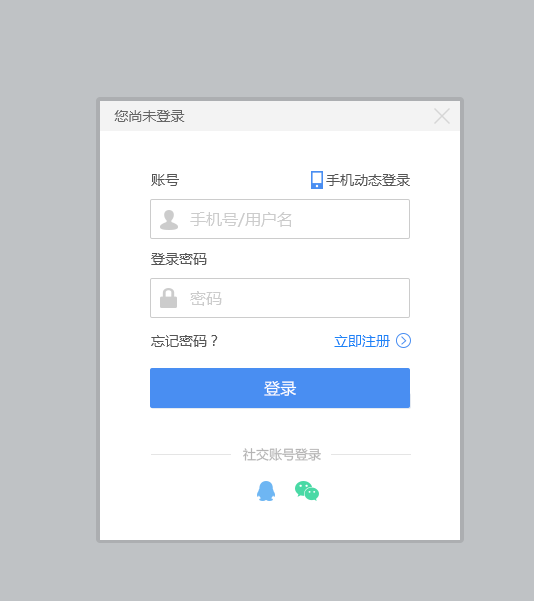
<style>
.page{position:relative;width:534px;height:601px;background:#bfc2c5}
.page>*{position:absolute;margin:0}
.t1{font:14px "MicrosoftYaHei";color:#666666}
.t2{font:14px "MicrosoftYaHei";color:#555555}
.t3{font:16px "MicrosoftYaHei";color:#cccccc}
.t4{font:14px "MicrosoftYaHei";color:#1c83f7}
.t5{font:16px "MicrosoftYaHei";color:#ffffff}
.t6{font:13px "MicrosoftYaHei";color:#b5b4b4}
</style>
<div class="page">
<p class="t1" style="left:114px;top:110px;width:71px;height:12px">您尚未登录</p>
<p class="t2" style="left:151px;top:174px;width:28px;height:12px">账号</p>
<p class="t2" style="left:326px;top:174px;width:84px;height:12px">手机动态登录</p>
<p class="t3" style="left:190px;top:212px;width:102px;height:15px">手机号/用户名</p>
<p class="t2" style="left:151px;top:253px;width:56px;height:12px">登录密码</p>
<p class="t3" style="left:190px;top:291px;width:32px;height:15px">密码</p>
<p class="t2" style="left:151px;top:335px;width:67px;height:12px">忘记密码？</p>
<p class="t4" style="left:334px;top:335px;width:56px;height:12px">立即注册</p>
<p class="t5" style="left:264px;top:381px;width:33px;height:15px">登录</p>
<p class="t6" style="left:243px;top:448px;width:78px;height:13px">社交账号登录</p>
</div>
